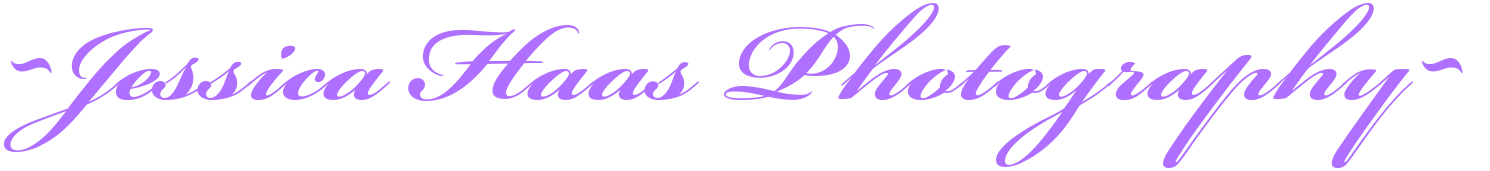
<style>
.page{position:relative;width:1490px;height:171px;background:#ffffff}
.page>*{position:absolute;margin:0}
.t1{font:168px "BickhamScriptPro-Bold";color:#af70ff}
</style>
<div class="page">
<p class="t1" style="left:3px;top:3px;width:1460px;height:165px">~Jessica Haas Photography~</p>
</div>
